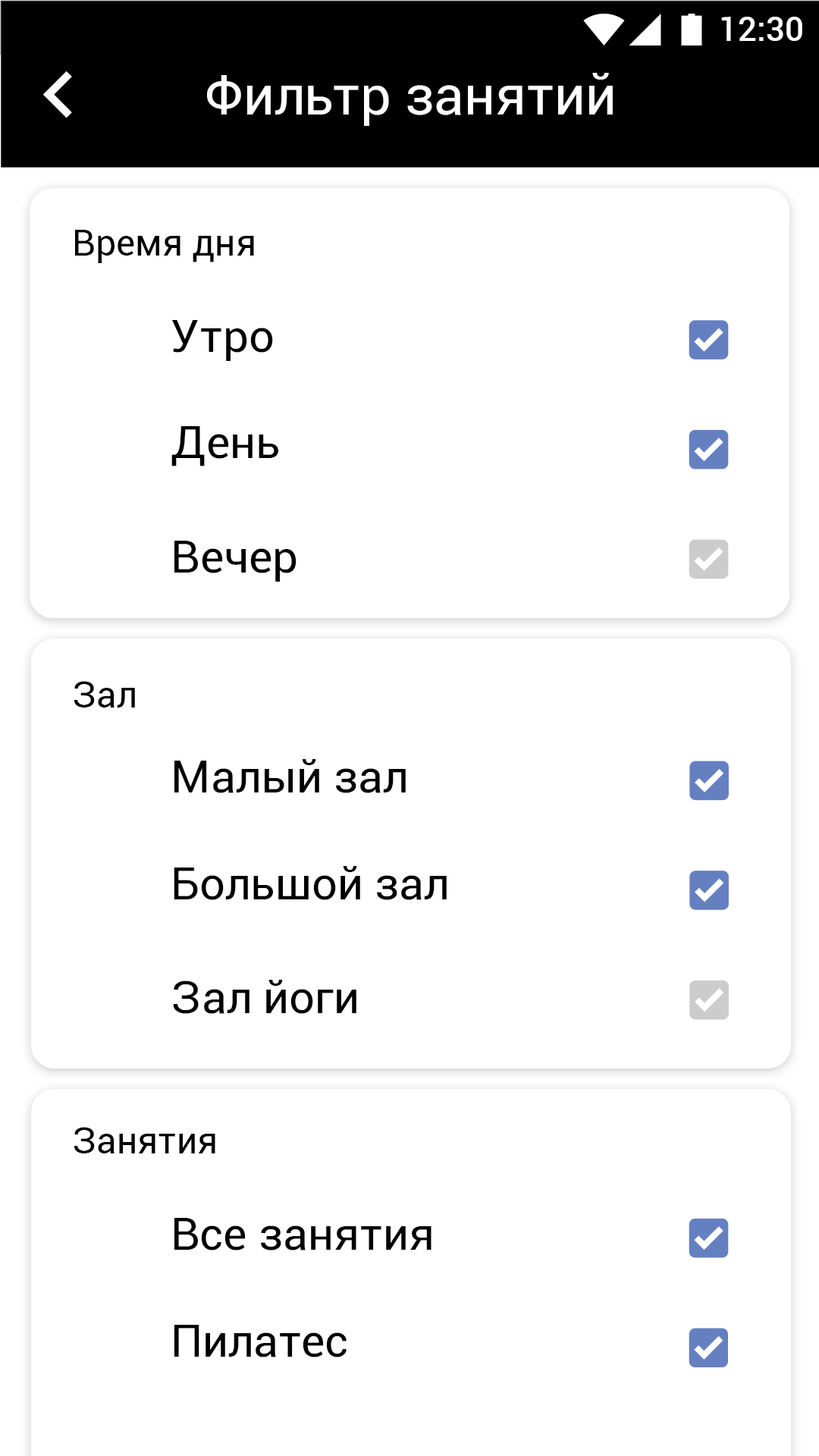
<style>
.page{position:relative;width:819px;height:1456px;background:#ffffff}
.page>*{position:absolute;margin:0}
.t1{font:33.4px "Roboto-Medium";color:#ffffff}
.t2{font:54.6px "Roboto-Regular";color:#ffffff}
.t3{font:36.4px "Roboto-Regular";color:#000000}
.t4{font:45.5px "Roboto-Regular";color:#000000}
</style>
<div class="page">
<p class="t1" style="left:721px;top:17px;width:81px;height:24px">12:30</p>
<p class="t2" style="left:207px;top:73px;width:406px;height:53px">Фильтр занятий</p>
<p class="t3" style="left:75px;top:230px;width:179px;height:33px">Время дня</p>
<p class="t4" style="left:172px;top:320px;width:101px;height:41px">Утро</p>
<p class="t4" style="left:171px;top:426px;width:107px;height:40px">День</p>
<p class="t4" style="left:174px;top:541px;width:123px;height:41px">Вечер</p>
<p class="t3" style="left:74px;top:681px;width:61px;height:27px">Зал</p>
<p class="t4" style="left:174px;top:759px;width:232px;height:34px">Малый зал</p>
<p class="t4" style="left:174px;top:866px;width:273px;height:34px">Большой зал</p>
<p class="t4" style="left:173px;top:980px;width:183px;height:34px">Зал йоги</p>
<p class="t3" style="left:74px;top:1127px;width:141px;height:26px">Занятия</p>
<p class="t4" style="left:174px;top:1218px;width:257px;height:32px">Все занятия</p>
<p class="t4" style="left:174px;top:1325px;width:173px;height:32px">Пилатес</p>
</div>
